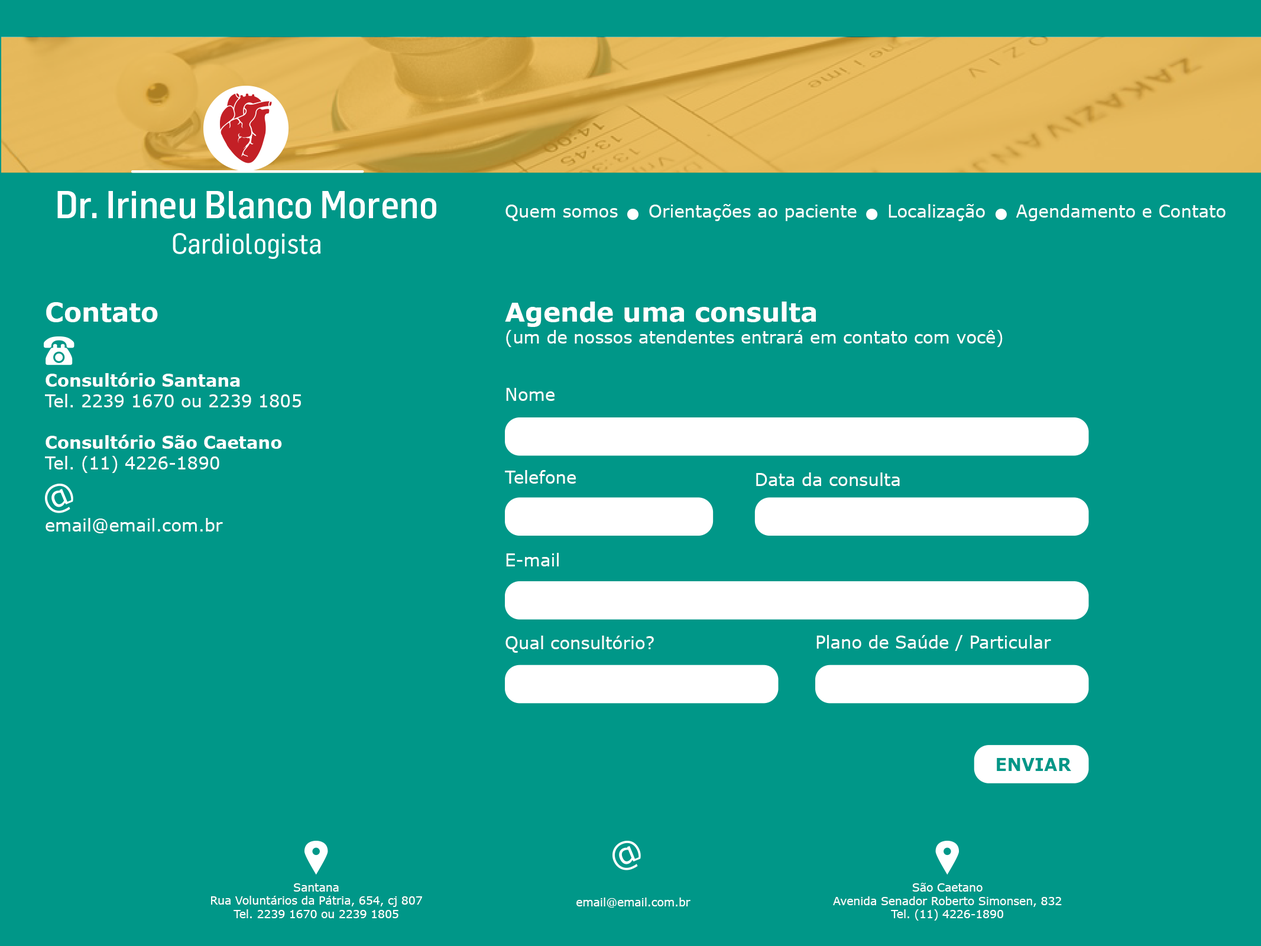
<style>
.page{position:relative;width:1261px;height:946px;background:#009788}
.page>*{position:absolute;margin:0}
.t1{font:17.2px "Verdana";color:#ffffff}
.t2{font:25.9px/22.2px "Verdana-Bold";color:#ffffff}
.t3{font:17.2px "Verdana-Bold";color:#ffffff}
.t4{font:17.2px/22.2px "Verdana";color:#ffffff}
.t5{font:11.1px "Verdana";color:#ffffff}
</style>
<div class="page">
<p class="t1" style="left:505px;top:204px;width:720px;height:17px">Quem somos     Orientações ao paciente     Localização     Agendamento e Contato</p>
<p class="t1" style="left:45px;top:302px;width:256px;height:231px"><span class="t2">Contato<br><br><br></span><span class="t3">Consultório Santana<br></span>Tel. 2239 1670 ou 2239 1805 <br><br><span class="t3">Consultório São Caetano<br></span>Tel. (11) 4226-1890<br><br><br>email@email.com.br</p>
<p class="t4" style="left:505px;top:301px;width:498px;height:46px"><span class="t2">Agende uma consulta<br></span>(um de nossos atendentes entrará em contato com você)</p>
<p class="t1" style="left:756px;top:472px;width:144px;height:14px">Data da consulta</p>
<p class="t1" style="left:816px;top:635px;width:235px;height:16px">Plano de Saúde / Particular</p>
<p class="t5" style="left:211px;top:883px;width:211px;height:35px;text-align:center">Santana<br>Rua Voluntários da Pátria, 654, cj 807<br>Tel. 2239 1670 ou 2239 1805</p>
<p class="t5" style="left:833px;top:883px;width:229px;height:37px;text-align:center">São Caetano<br>Avenida Senador Roberto Simonsen, 832<br>Tel. (11) 4226-1890</p>
<p class="t5" style="left:576px;top:897px;width:114px;height:10px">email@email.com.br</p>
</div>
